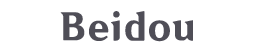
<style>
.page{position:relative;width:256px;height:56px;background:#ffffff}
.page>*{position:absolute;margin:0}
.t1{font:36px "HYWenHei-HEW";color:#4f4e57}
</style>
<div class="page">
<p class="t1" style="left:60px;top:11px;width:133px;height:31px">Beidou</p>
</div>
